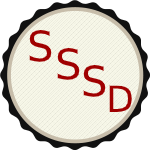
<style>
.page{position:relative;width:150px;height:150px;background:#f7f7e8}
.page>*{position:absolute;margin:0}
.t1{font:42px "ETBembo-RomanLF";color:#a00000}
.t2{font:36px "ETBembo-RomanLF";color:#a00000}
</style>
<div class="page">
<p class="t1" style="left:29px;top:30px;width:23px;height:32px">S</p>
<p class="t1" style="left:57px;top:48px;width:23px;height:32px">S</p>
<p class="t1" style="left:83px;top:65px;width:23px;height:32px">S</p>
<p class="t2" style="left:109px;top:85px;width:23px;height:27px">D</p>
</div>
